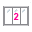
<style>
.page{position:relative;width:32px;height:32px;background:#ffffff}
.page>*{position:absolute;margin:0}
.t1{font:9px "Arial-BoldMT";color:#ff0099}
</style>
<div class="page">
<p class="t1" style="left:13px;top:13px;width:6px;height:7px">2</p>
</div>
